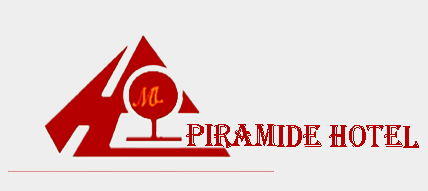
<style>
.page{position:relative;width:428px;height:191px;background:#eeeeee}
.page>*{position:absolute;margin:0}
.t1{font:33.4px "Algerian";color:#b40000;scale:0.9 1}
</style>
<div class="page">
<p class="t1" style="left:186px;top:124px;width:233px;height:24px">Piramide Hotel</p>
</div>
